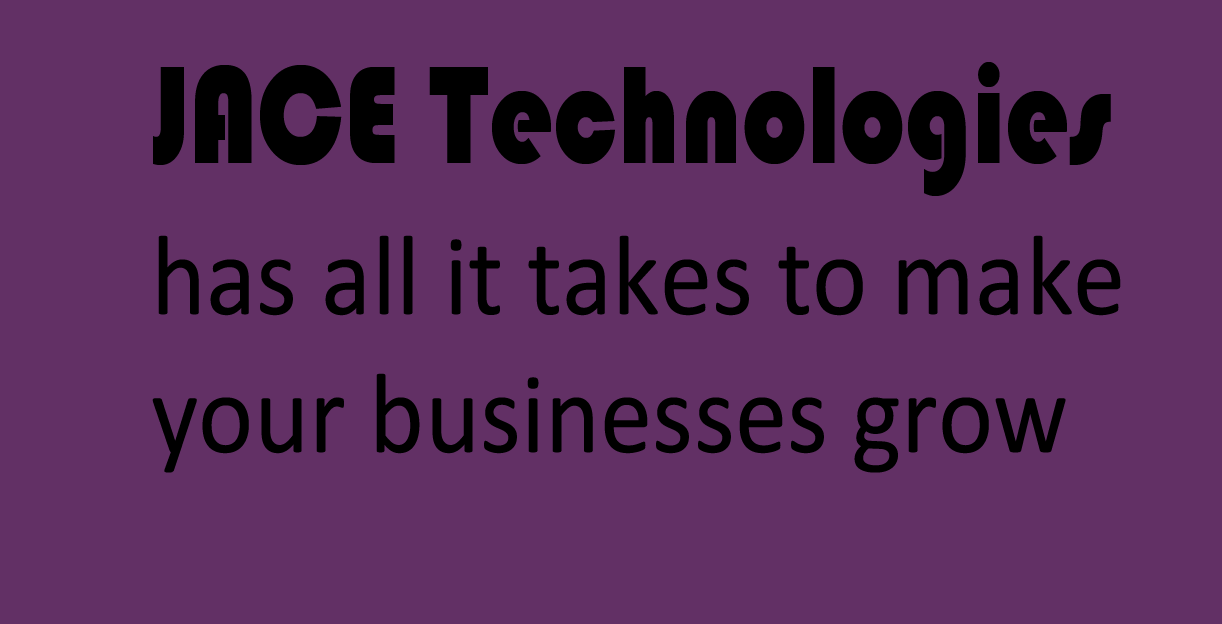
<style>
.page{position:relative;width:1222px;height:624px;background:#623065}
.page>*{position:absolute;margin:0}
.t1{font:144.3px "Bauhaus93";color:#000000;scale:0.8 1}
.t2{font:115.3px "Calibri";color:#000000;scale:0.91 1}
</style>
<div class="page">
<p class="t1" style="left:153px;top:62px;width:958px;height:134px">JACE Technologies</p>
<p class="t2" style="left:152px;top:235px;width:969px;height:238px">has all it takes to make <br>your businesses grow</p>
</div>
